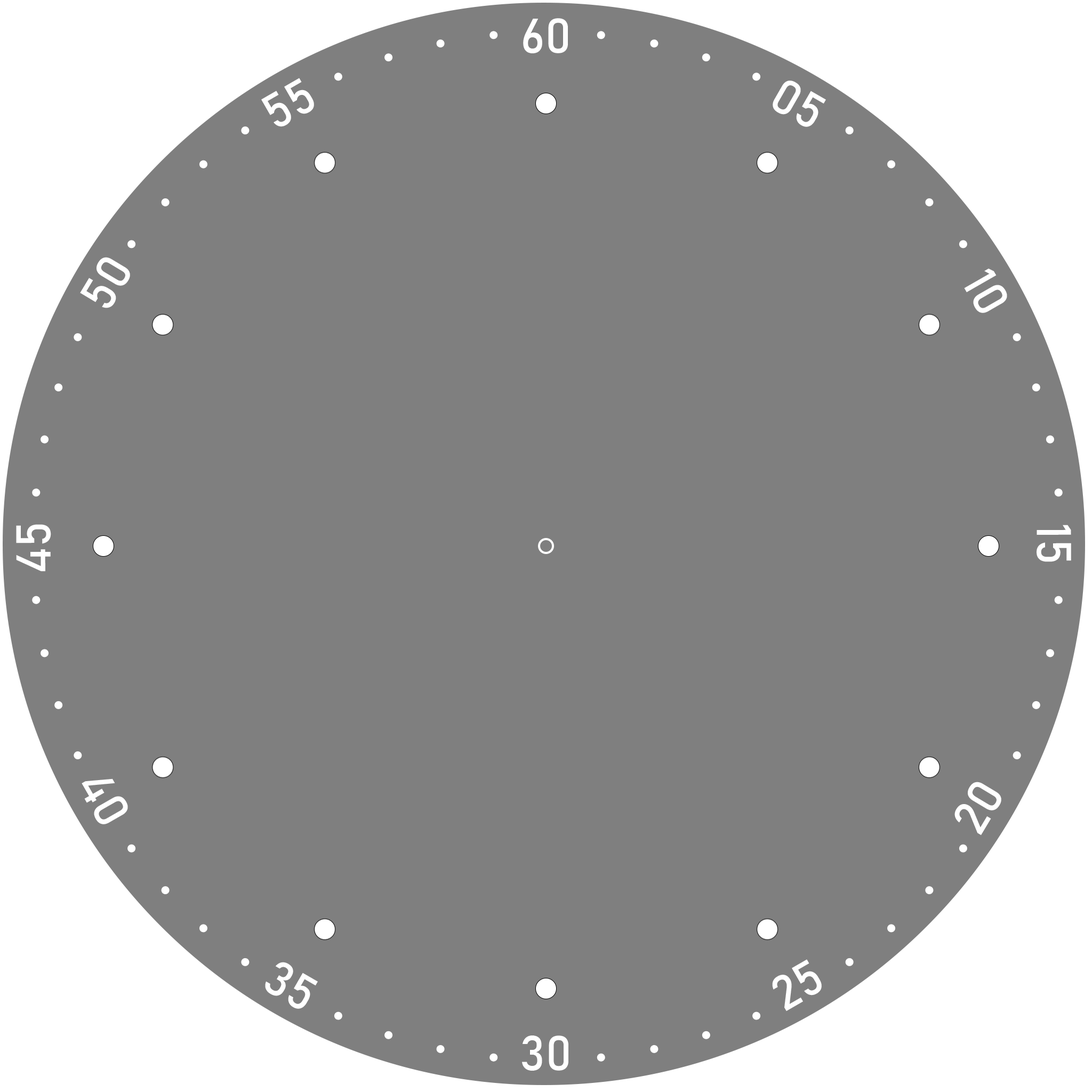
<style>
.page{position:relative;width:1092px;height:1092px;background:#7f7f7f}
.page>*{position:absolute;margin:0}
.t1{font:48px "Bahnschrift";color:#ffffff}
</style>
<div class="page">
<p class="t1" style="left:523px;top:18px;width:45px;height:35px">60</p>
<p class="t1" style="left:261px;top:78px;width:53px;height:49px;rotate:-30deg">55</p>
<p class="t1" style="left:773px;top:81px;width:53px;height:46px;rotate:30deg">05</p>
<p class="t1" style="left:80px;top:257px;width:50px;height:51px;rotate:-59deg">50</p>
<p class="t1" style="left:964px;top:268px;width:43px;height:45px;rotate:60deg">10</p>
<p class="t1" style="left:16px;top:524px;width:35px;height:48px;rotate:-90deg">45</p>
<p class="t1" style="left:1037px;top:525px;width:34px;height:37px;rotate:90deg">15</p>
<p class="t1" style="left:82px;top:778px;width:46px;height:46px;rotate:60deg">40</p>
<p class="t1" style="left:954px;top:782px;width:47px;height:54px;rotate:-59deg">20</p>
<p class="t1" style="left:265px;top:962px;width:53px;height:47px;rotate:30deg">35</p>
<p class="t1" style="left:772px;top:959px;width:50px;height:52px;rotate:-30deg">25</p>
<p class="t1" style="left:522px;top:1035px;width:46px;height:36px">30</p>
</div>
